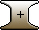
<style>
.page{position:relative;width:39px;height:30px;background:#ffffff}
.page>*{position:absolute;margin:0}
.t1{font:11px "Verdana";color:#000000}
</style>
<div class="page">
<p class="t1" style="left:17px;top:11px;width:7px;height:7px">+</p>
</div>
